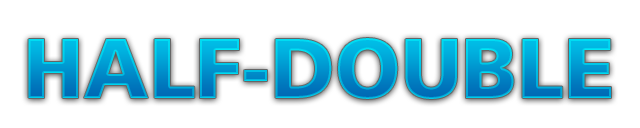
<style>
.page{position:relative;width:640px;height:128px;background:#ffffff}
.page>*{position:absolute;margin:0}
.t1{font:84px "FrutigerLTStd-Black"}
</style>
<div class="page">
<p class="t1" style="left:28px;top:38px;width:583px;height:61px">HALF-DOUBLE</p>
</div>
